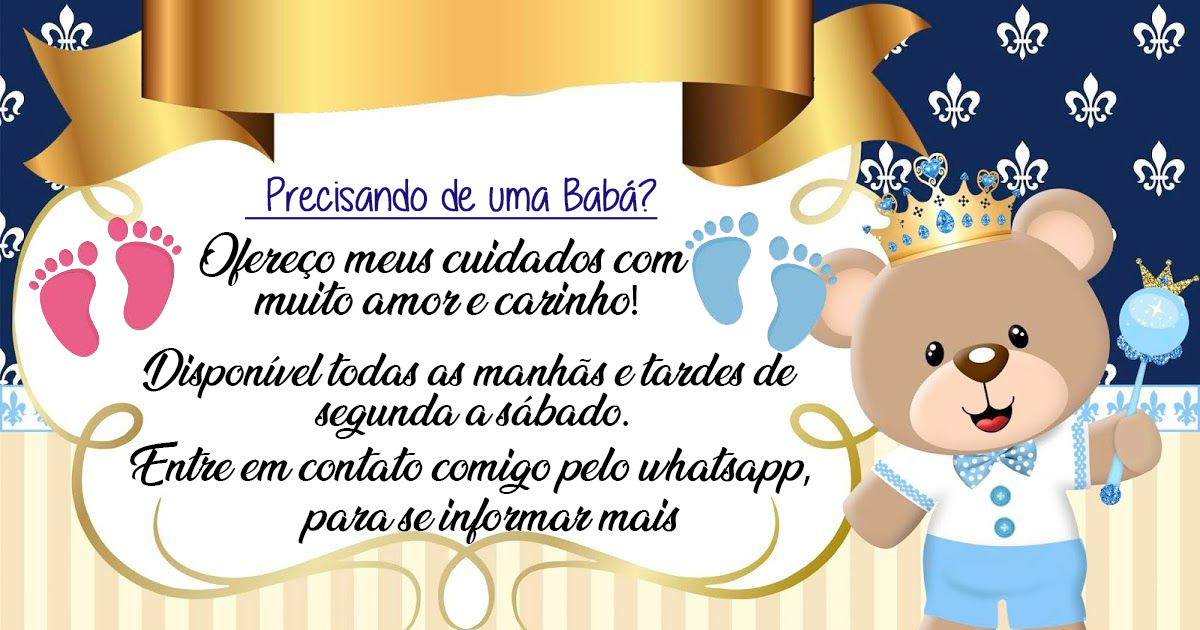
<style>
.page{position:relative;width:1200px;height:630px;background:#ffffff}
.page>*{position:absolute;margin:0}
.t1{font:46px "Alittlesunshine";color:#200d7a;font-weight:bold;text-decoration:underline}
.t2{font:43.1px/14.1px "AnandaBlack";color:#000000}
.t3{font:43.1px/14.1px "MyriadPro-Regular";color:#000000}
.t4{font:40.6px/13.3px "AnandaBlack";color:#000000}
.t5{font:40.6px/13.3px "MyriadPro-Regular";color:#000000}
.t6{font:41.5px "AnandaBlack";color:#000000}
.t7{font:41.5px "MyriadPro-Regular";color:#000000}
.t8{font:41.6px "AnandaBlack";color:#000000}
</style>
<div class="page">
<p class="t1" style="left:244px;top:176px;width:414px;height:44px">Precisando de uma Babá?</p>
<p class="t2" style="left:199px;top:232px;width:490px;height:84px;text-align:center">Ofereço meus cuidados com <br><br><br>muito amor e carinho<span class="t3">!</span></p>
<p class="t4" style="left:142px;top:348px;width:656px;height:91px;text-align:center">Disponível todas as manhãs e tardes de <br><br><br>segunda a sábado<span class="t5">.</span></p>
<p class="t6" style="left:130px;top:441px;width:680px;height:53px">Entre em contato comigo pelo whatsapp<span class="t7">,</span></p>
<p class="t8" style="left:298px;top:497px;width:382px;height:47px">para se informar mais!</p>
</div>
